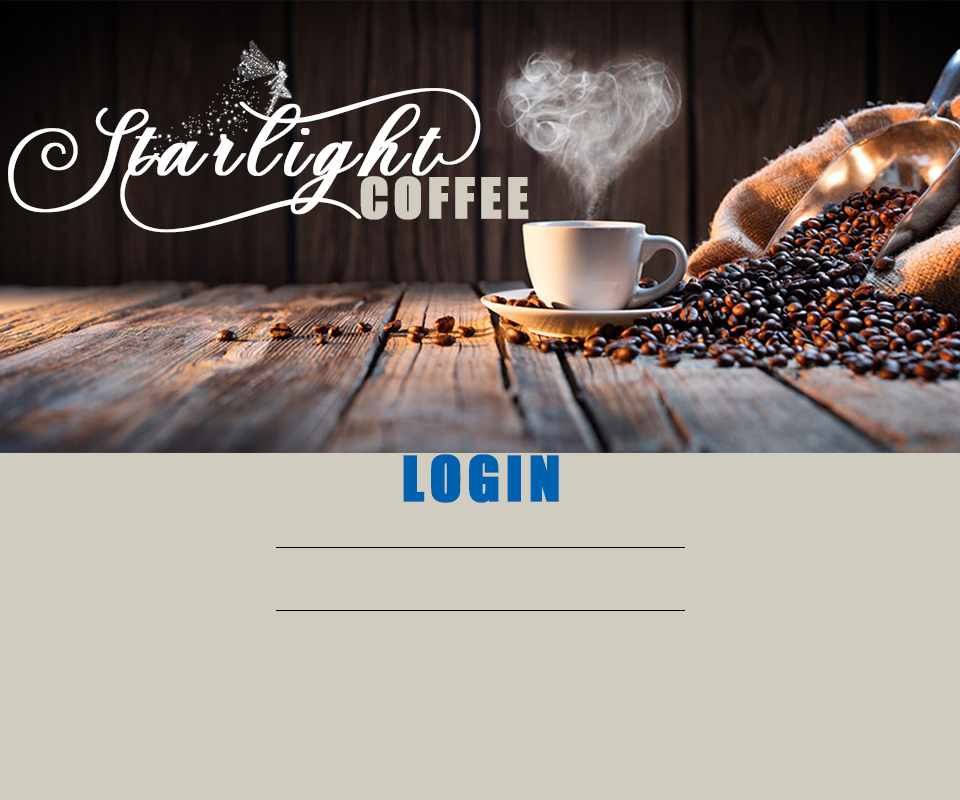
<style>
.page{position:relative;width:960px;height:800px;background:#d1ccc0}
.page>*{position:absolute;margin:0}
.t1{font:91.5px "Anitha";letter-spacing:0.08em;color:#ffffff;font-weight:bold}
.t2{font:51.8px "UTM-Impact";letter-spacing:0.08em;color:#d1ccc0;font-weight:bold}
.t3{font:58px "UTM-Impact";letter-spacing:0.08em;color:#0061af;font-weight:bold}
</style>
<div class="page">
<p class="t1" style="left:8px;top:88px;width:473px;height:145px">Starlight</p>
<p class="t2" style="left:360px;top:176px;width:169px;height:44px">COFFEE</p>
<p class="t3" style="left:403px;top:454px;width:156px;height:49px">LOGIN</p>
</div>
